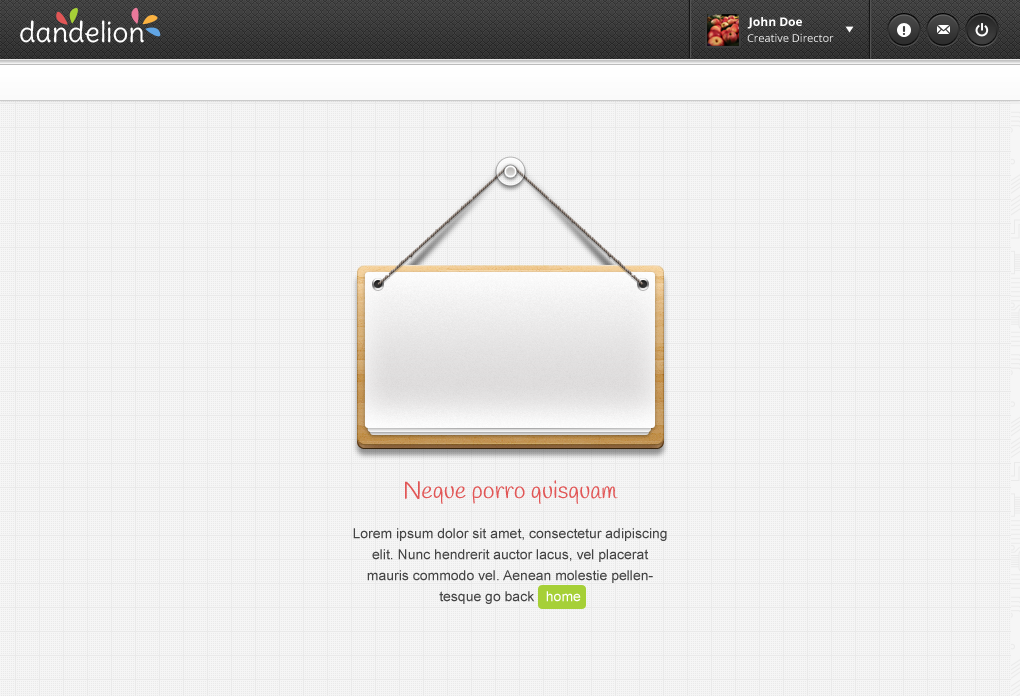
<style>
.page{position:relative;width:1020px;height:696px;background:#f5f5f5}
.page>*{position:absolute;margin:0}
.t1{font:12px "OpenSans-Bold";color:#ffffff}
.t2{font:28.2px "Delius-Regular";color:#ffffff}
.t3{font:11px "OpenSans";color:#eaeaea}
.t4{font:24px "Handlee-Regular";color:#e15656}
.t5{font:14px/21px "ArialMT";color:#444444}
.t6{font:14px/21px "ArialMT";color:#ffffff}
</style>
<div class="page">
<p class="t1" style="left:747px;top:17px;width:55px;height:12px">John Doe</p>
<p class="t2" style="left:20px;top:20px;width:124px;height:23px">dandelion</p>
<p class="t3" style="left:747px;top:33px;width:87px;height:9px">Creative Director</p>
<p class="t4" style="left:405px;top:480px;width:213px;height:24px">Neque porro quisquam</p>
<p class="t5" style="left:353px;top:528px;width:314px;height:76px;text-align:center">Lorem ipsum dolor sit amet, consectetur adipiscing elit. Nunc hendrerit auctor lacus, vel placerat mauris commodo vel. Aenean molestie pellentesque go back   <span class="t6">home</span></p>
</div>
